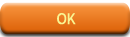
<style>
.page{position:relative;width:130px;height:37px}
.page>*{position:absolute;margin:0}
.t1{font:15px "TrebuchetMS";color:#f9f592}
</style>
<div class="page">
<p class="t1" style="left:57px;top:13px;width:19px;height:12px">OK</p>
</div>
